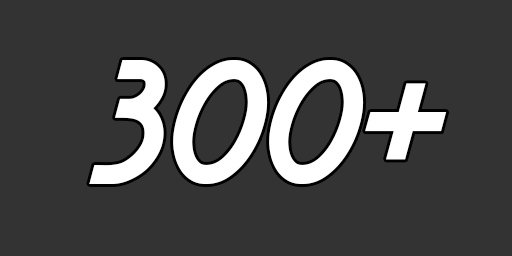
<style>
.page{position:relative;width:512px;height:256px;background:#333333}
.page>*{position:absolute;margin:0}
.t1{font:240px "AeroviasBrasilNF";color:#ffffff}
</style>
<div class="page">
<p class="t1" style="left:89px;top:60px;width:358px;height:124px">300+</p>
</div>
